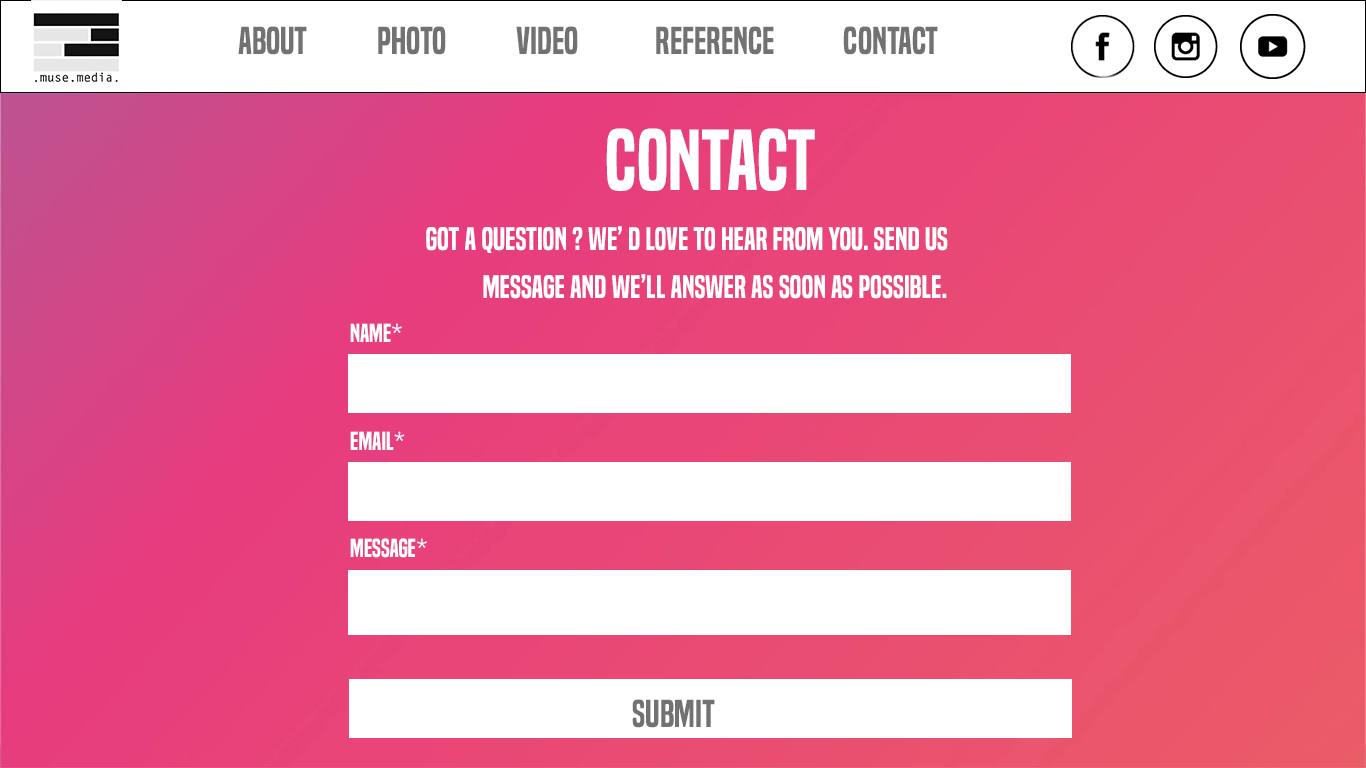
<style>
.page{position:relative;width:1366px;height:768px;background:#ffffff}
.page>*{position:absolute;margin:0}
.t1{font:36px "BuiltTitlingSb-Regular";color:#727272}
.t2{font:80px "BuiltTitlingSb-Regular";color:#ffffff}
.t3{font:30px/24px "BuiltTitlingSb-Regular";color:#ffffff}
.t4{font:24px "BuiltTitlingSb-Regular";color:#ffffff}
</style>
<div class="page">
<p class="t1" style="left:238px;top:26px;width:69px;height:29px">About</p>
<p class="t1" style="left:378px;top:26px;width:68px;height:29px">Photo</p>
<p class="t1" style="left:516px;top:26px;width:62px;height:29px">Video</p>
<p class="t1" style="left:656px;top:26px;width:118px;height:29px">Reference</p>
<p class="t1" style="left:843px;top:26px;width:95px;height:29px">Contact</p>
<p class="t2" style="left:606px;top:128px;width:209px;height:63px">Contact</p>
<p class="t3" style="left:426px;top:226px;width:522px;height:73px">Got a question ? We’ d love to hear from you. Send us<br><br>  message and we’ll answer as soon as possible.</p>
<p class="t4" style="left:350px;top:323px;width:52px;height:19px">Name*</p>
<p class="t4" style="left:350px;top:431px;width:55px;height:19px">Email*</p>
<p class="t4" style="left:350px;top:538px;width:77px;height:20px">Message*</p>
<p class="t1" style="left:632px;top:699px;width:83px;height:29px">Submit</p>
</div>
